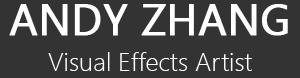
<style>
.page{position:relative;width:300px;height:78px;background:#333333}
.page>*{position:absolute;margin:0}
.t1{font:26px/36px "SegoeUI-Light";color:#ffffff}
.t2{font:43px/36px "SegoeUI";color:#ffffff;font-weight:bold}
</style>
<div class="page">
<p class="t1" style="left:9px;top:4px;width:279px;height:67px;text-align:center"><span class="t2">ANDY ZHANG<br></span>Visual Effects Artist</p>
</div>
